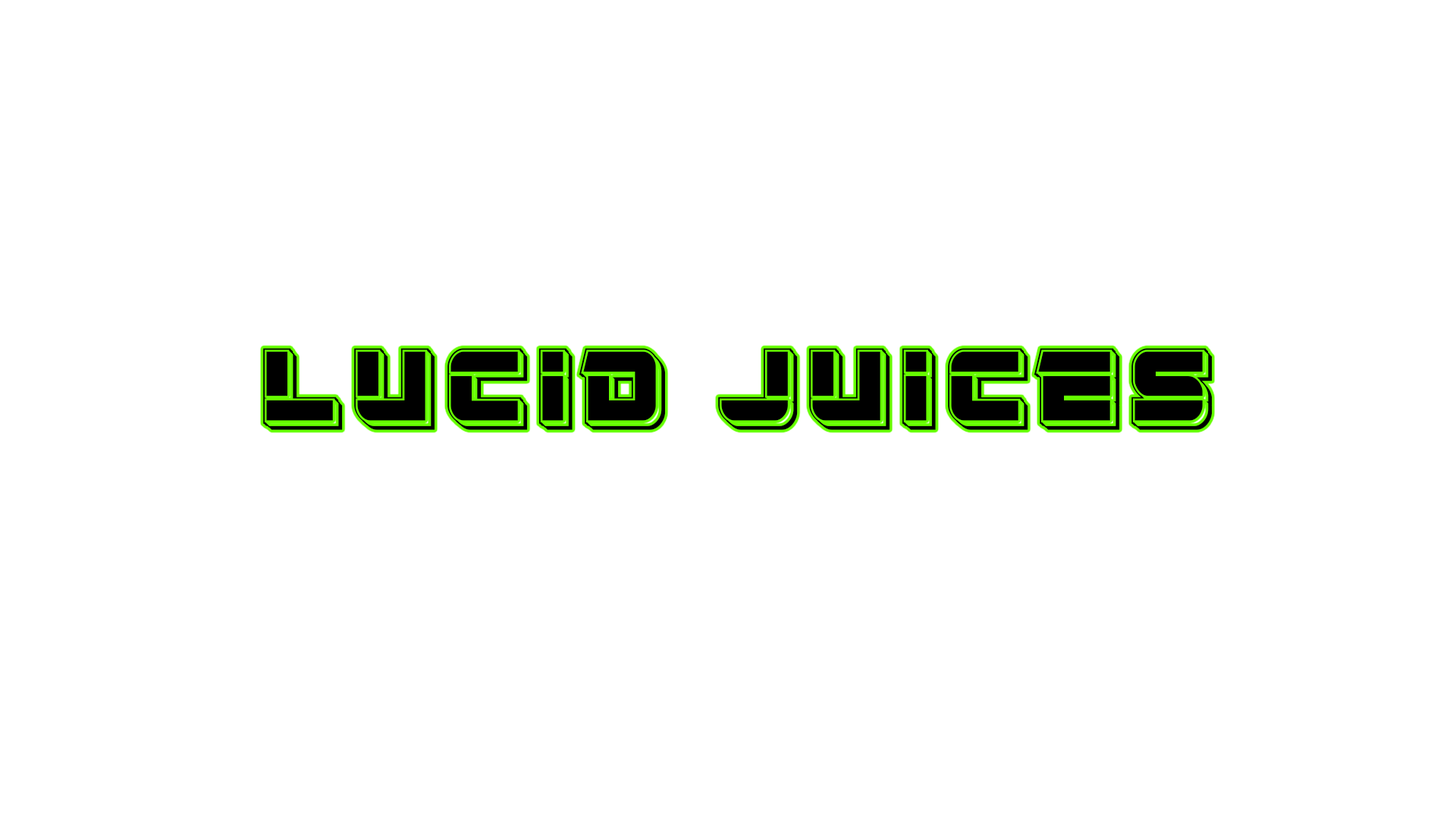
<style>
.page{position:relative;width:1456px;height:819px;background:#ffffff}
.page>*{position:absolute;margin:0}
.t1{font:118.3px "EdgeRacerPunch";letter-spacing:0.05em;color:#000000}
</style>
<div class="page">
<p class="t1" style="left:263px;top:348px;width:950px;height:82px">LUCID JUICES</p>
</div>
